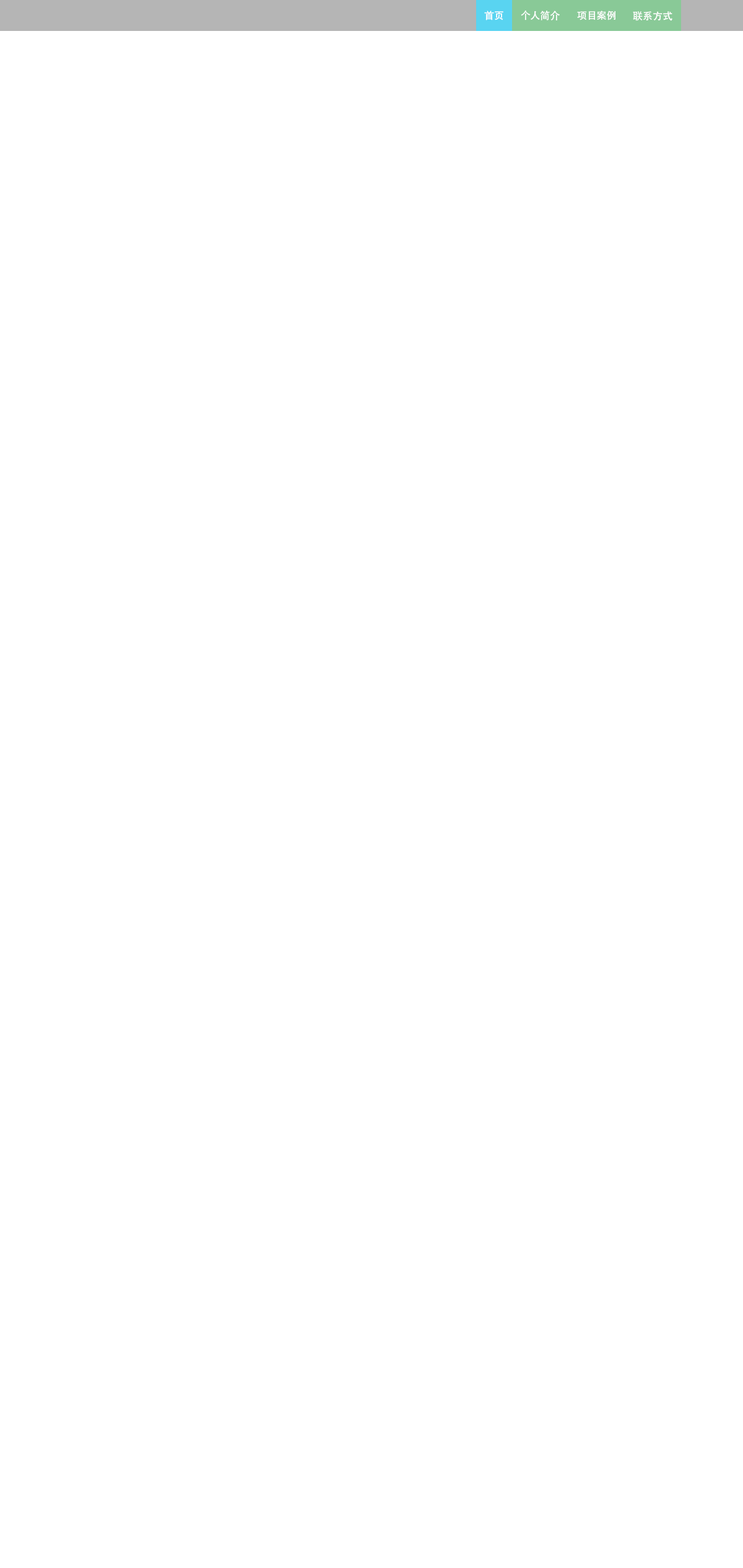
<style>
.page{position:relative;width:743px;height:1568px;background:#ffffff}
.page>*{position:absolute;margin:0}
.t1{font:9.9px "AdobeHeitiStd-Regular";color:#ffffff}
</style>
<div class="page">
<p class="t1" style="left:484px;top:11px;width:19px;height:9px">首页</p>
<p class="t1" style="left:521px;top:11px;width:39px;height:9px">个人简介</p>
<p class="t1" style="left:577px;top:11px;width:39px;height:9px">项目案例</p>
<p class="t1" style="left:633px;top:11px;width:39px;height:10px">联系方式</p>
</div>
